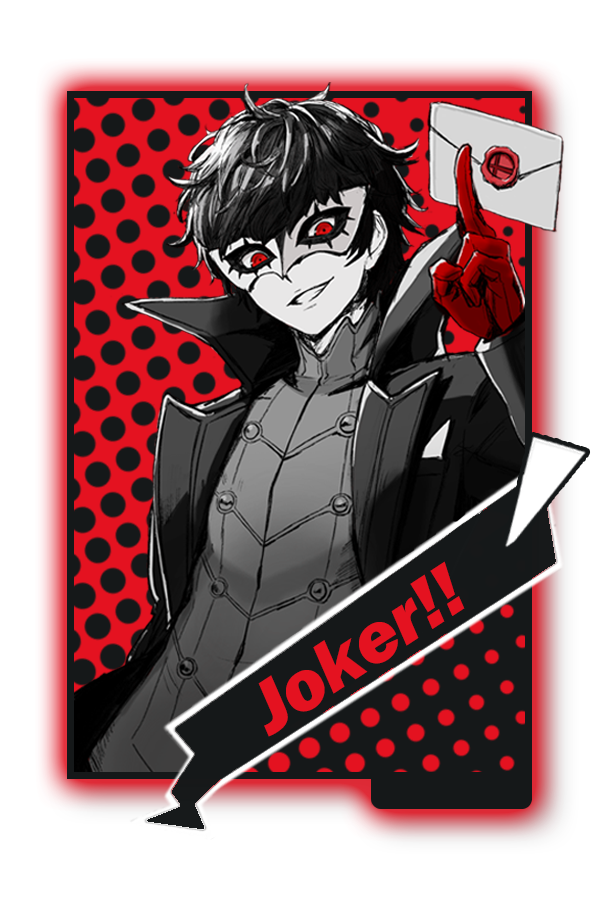
<style>
.page{position:relative;width:600px;height:900px;background:#ffffff}
.page>*{position:absolute;margin:0}
.t1{font:74.9px "FranklinGothic-HeavyItalic";color:#e41220}
</style>
<div class="page">
<p class="t1" style="left:258px;top:561px;width:207px;height:176px;rotate:-33deg">Joker!!</p>
</div>
